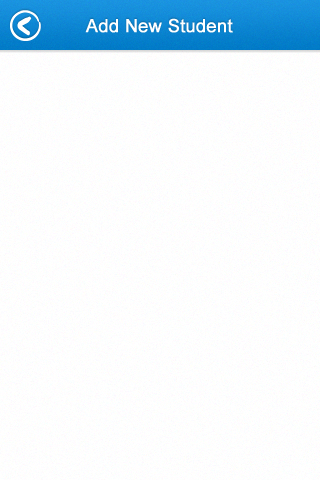
<style>
.page{position:relative;width:320px;height:480px}
.page>*{position:absolute;margin:0}
.t1{font:18px "ArialMT";letter-spacing:0.025em;color:#ffffff;font-weight:bold}
</style>
<div class="page">
<p class="t1" style="left:85px;top:18px;width:148px;height:15px">Add New Student</p>
</div>
